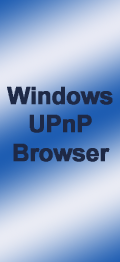
<style>
.page{position:relative;width:120px;height:262px}
.page>*{position:absolute;margin:0}
.t1{font:23.9px "MS Dialog";color:#1e2946;font-weight:bold}
</style>
<div class="page">
<p class="t1" style="left:7px;top:86px;width:106px;height:76px;text-align:center">Windows<br>UPnP<br>Browser</p>
</div>
